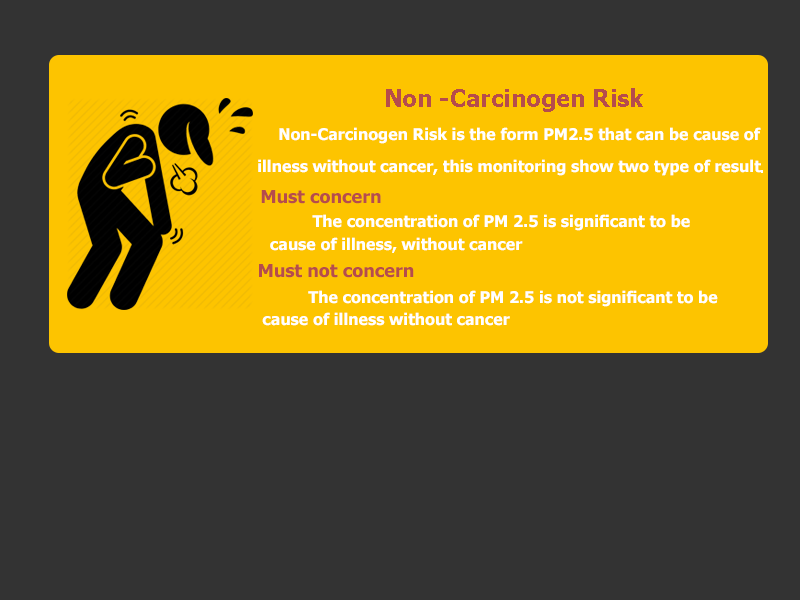
<style>
.page{position:relative;width:800px;height:600px;background:#333333}
.page>*{position:absolute;margin:0}
.t1{font:24px "Tahoma-Bold";color:#b64c4c}
.t2{font:16px "Tahoma-Bold";color:#ffffff}
.t3{font:18px "Tahoma-Bold";color:#b64c4c}
</style>
<div class="page">
<p class="t1" style="left:386px;top:88px;width:257px;height:24px">Non -Carcinogen Risk</p>
<p class="t2" style="left:279px;top:127px;width:482px;height:17px">Non-Carcinogen Risk is the form PM2.5 that can be cause of</p>
<p class="t2" style="left:258px;top:159px;width:503px;height:17px">illness without cancer, this monitoring show two type of result</p>
<p class="t3" style="left:261px;top:190px;width:120px;height:14px">Must concern</p>
<p class="t2" style="left:312px;top:214px;width:378px;height:17px">The concentration of PM 2.5 is significant to be</p>
<p class="t2" style="left:270px;top:237px;width:253px;height:16px">cause of illness, without cancer</p>
<p class="t3" style="left:259px;top:264px;width:155px;height:14px">Must not concern</p>
<p class="t2" style="left:308px;top:290px;width:410px;height:17px">The concentration of PM 2.5 is not significant to be</p>
<p class="t2" style="left:262px;top:312px;width:248px;height:14px">cause of illness without cancer</p>
</div>
